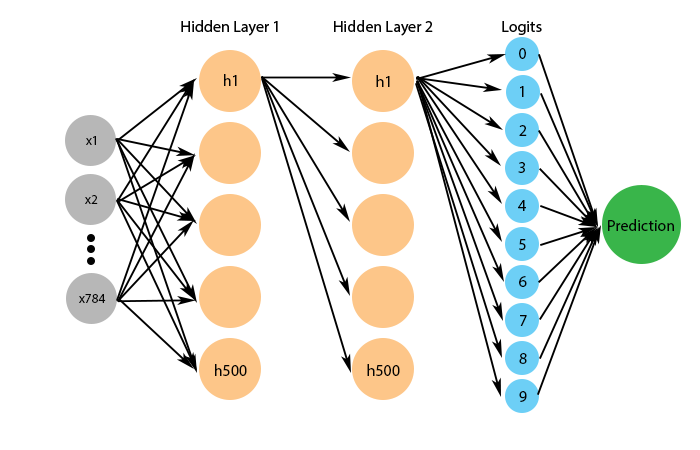
<style>
.page{position:relative;width:700px;height:450px;background:#ffffff}
.page>*{position:absolute;margin:0}
.t1{font:12px "MyriadPro-Regular";color:#030303}
.t2{font:9.9px "MyriadPro-Regular";color:#030303}
</style>
<div class="page">
<p class="t1" style="left:181px;top:20px;width:97px;height:16px">Hidden Layer 1</p>
<p class="t1" style="left:334px;top:20px;width:99px;height:16px">Hidden Layer 2</p>
<p class="t1" style="left:502px;top:21px;width:40px;height:14px">Logits</p>
<p class="t1" style="left:519px;top:48px;width:7px;height:11px">0</p>
<p class="t1" style="left:224px;top:74px;width:13px;height:12px">h1</p>
<p class="t1" style="left:376px;top:75px;width:14px;height:12px">h1</p>
<p class="t1" style="left:520px;top:86px;width:4px;height:11px">1</p>
<p class="t1" style="left:519px;top:125px;width:8px;height:11px">2</p>
<p class="t2" style="left:86px;top:136px;width:10px;height:9px">x1</p>
<p class="t1" style="left:518px;top:162px;width:7px;height:11px">3</p>
<p class="t2" style="left:85px;top:195px;width:13px;height:9px">x2</p>
<p class="t1" style="left:518px;top:200px;width:8px;height:11px">4</p>
<p class="t1" style="left:608px;top:219px;width:66px;height:12px">Prediction</p>
<p class="t1" style="left:519px;top:239px;width:7px;height:11px">5</p>
<p class="t1" style="left:519px;top:276px;width:8px;height:11px">6</p>
<p class="t2" style="left:79px;top:294px;width:27px;height:9px">x784</p>
<p class="t1" style="left:520px;top:315px;width:7px;height:11px">7</p>
<p class="t1" style="left:519px;top:353px;width:8px;height:11px">8</p>
<p class="t1" style="left:215px;top:364px;width:32px;height:12px">h500</p>
<p class="t1" style="left:367px;top:364px;width:33px;height:12px">h500</p>
<p class="t1" style="left:519px;top:391px;width:8px;height:11px">9</p>
</div>
